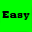
<style>
.page{position:relative;width:32px;height:32px;background:#00ff00}
.page>*{position:absolute;margin:0}
.t1{font:10px "Rockwell-ExtraBold";color:#000000}
</style>
<div class="page">
<p class="t1" style="left:2px;top:11px;width:28px;height:9px">Easy</p>
</div>
